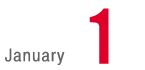
<style>
.page{position:relative;width:145px;height:70px;background:#ffffff}
.page>*{position:absolute;margin:0}
.t1{font:16.8px "YDVYGO540";letter-spacing:0.05em;color:#626262;scale:0.95 1}
</style>
<div class="page">
<p class="t1" style="left:5px;top:48px;width:60px;height:18px">January</p>
</div>
